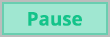
<style>
.page{position:relative;width:110px;height:37px;background:#a0e7d1}
.page>*{position:absolute;margin:0}
.t1{font:18.8px "OpenSans-Bold";color:#12c48b}
</style>
<div class="page">
<p class="t1" style="left:28px;top:12px;width:54px;height:14px">Pause</p>
</div>
